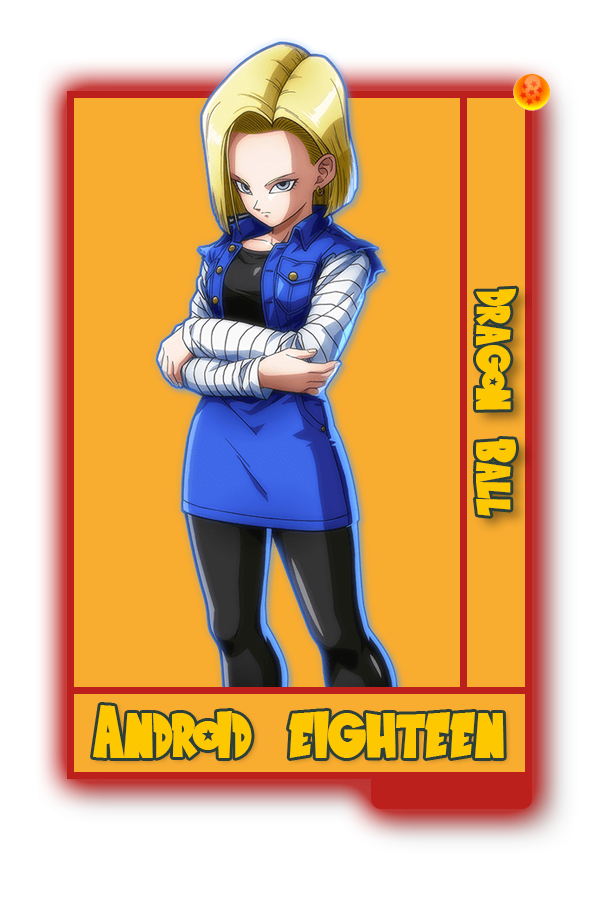
<style>
.page{position:relative;width:600px;height:900px;background:#f8ac30}
.page>*{position:absolute;margin:0}
.t1{font:56.9px "SaiyanSans";color:#fec800}
.t2{font:75px "SaiyanSans";color:#fec800}
</style>
<div class="page">
<p class="t1" style="left:476px;top:288px;width:40px;height:228px;rotate:90deg">Dragon Ball</p>
<p class="t2" style="left:93px;top:705px;width:411px;height:53px">Android eighteen</p>
</div>
